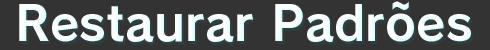
<style>
.page{position:relative;width:490px;height:50px;background:#333333}
.page>*{position:absolute;margin:0}
.t1{font:48px "RodinPro-B";color:#fffeff}
</style>
<div class="page">
<p class="t1" style="left:19px;top:1px;width:452px;height:41px">Restaurar Padrões</p>
</div>
